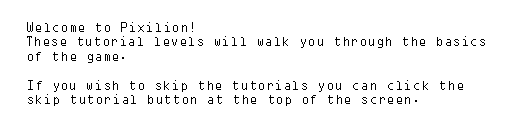
<style>
.page{position:relative;width:512px;height:128px;background:#ffffff}
.page>*{position:absolute;margin:0}
.t1{font:12px "OCRAStd";color:#000000}
</style>
<div class="page">
<p class="t1" style="left:27px;top:22px;width:458px;height:84px">Welcome to Pixilion!<br>These tutorial levels will walk you through the basics<br>of the game.<br><br>If you wish to skip the tutorials you can click the <br>skip tutorial button at the top of the screen.</p>
</div>
